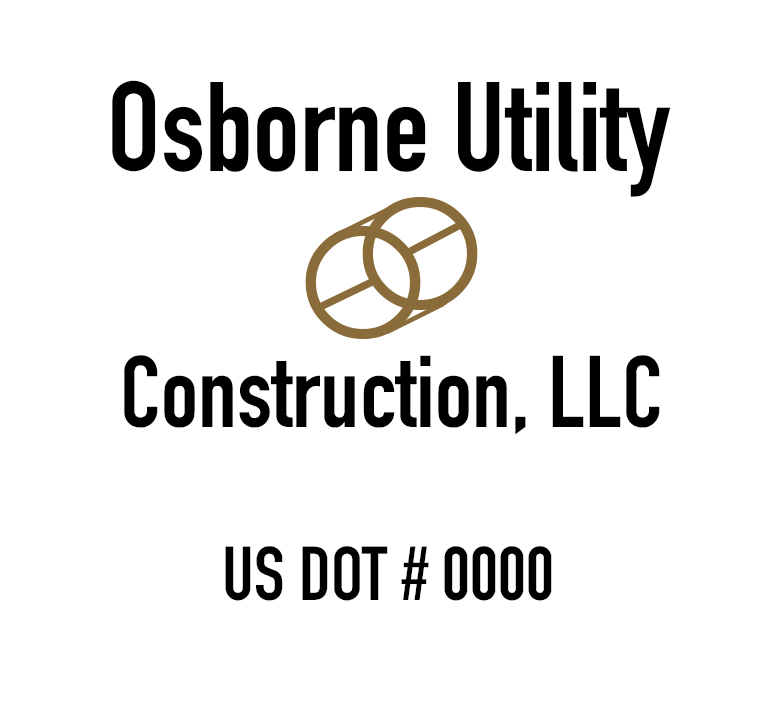
<style>
.page{position:relative;width:763px;height:702px;background:#ffffff}
.page>*{position:absolute;margin:0}
.t1{font:125px "DINCondensed-Bold";color:#000000}
.t2{font:100px "DINCondensed-Bold";color:#000000}
.t3{font:75px "DINCondensed-Bold";color:#000000}
</style>
<div class="page">
<p class="t1" style="left:112px;top:80px;width:559px;height:117px">Osborne Utility</p>
<p class="t2" style="left:124px;top:355px;width:536px;height:80px">Construction, LLC</p>
<p class="t3" style="left:225px;top:546px;width:327px;height:55px">US DOT # 0000</p>
</div>
